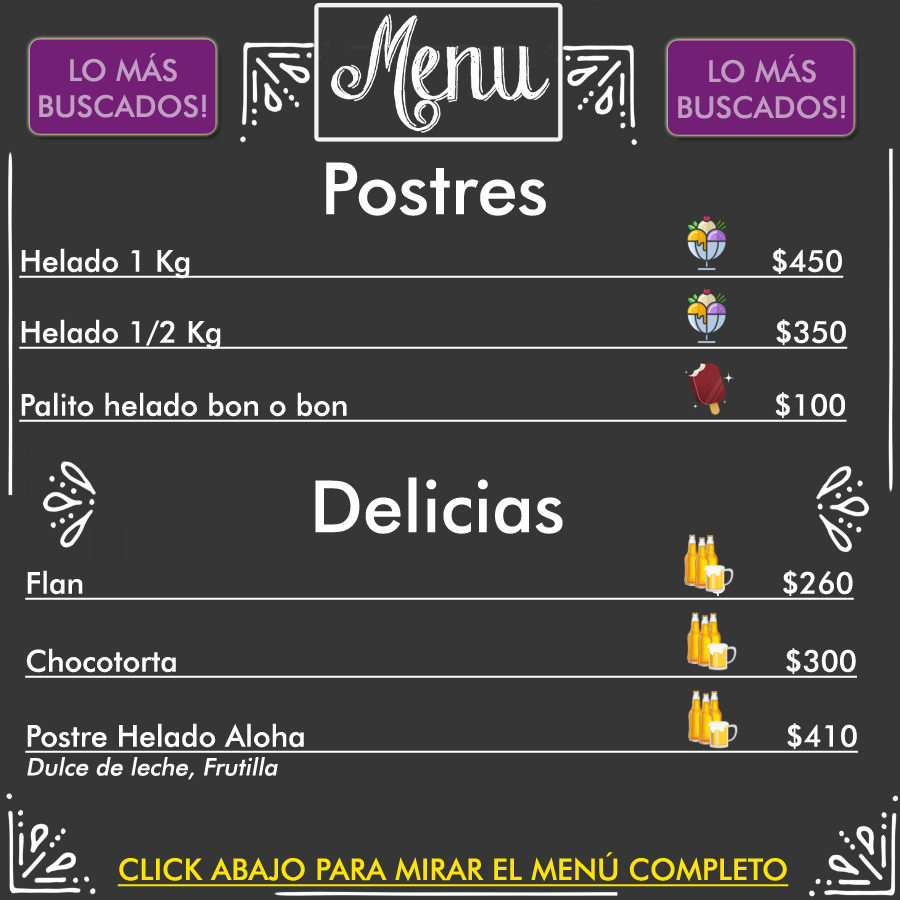
<style>
.page{position:relative;width:900px;height:900px;background:#363636}
.page>*{position:absolute;margin:0}
.t1{font:30px "FuturaBT-Medium";color:#c29dc3;text-transform:uppercase}
.t2{font:30px "FuturaBT-Medium";color:#c09ac1;text-transform:uppercase}
.t3{font:72px "FuturaBT-Medium";color:#ffffff}
.t4{font:30px "FuturaBT-Medium";color:#ffffff;text-decoration:underline}
.t5{font:24px "FuturaBT-Medium";color:#ffffff;font-style:italic}
.t6{font:30px "FuturaBT-Medium";color:#ffe400;text-transform:uppercase;text-decoration:underline}
</style>
<div class="page">
<p class="t1" style="left:39px;top:53px;width:167px;height:65px;text-align:center">lo mÁs<br>buscados!</p>
<p class="t2" style="left:678px;top:54px;width:167px;height:65px;text-align:center">lo mÁs<br>buscados!</p>
<p class="t3" style="left:326px;top:162px;width:220px;height:54px">Postres</p>
<p class="t4" style="left:19px;top:248px;width:825px;height:31px">Helado 1 Kg                                                                $450</p>
<p class="t4" style="left:19px;top:319px;width:829px;height:31px">Helado 1/2 Kg                                                             $350</p>
<p class="t4" style="left:19px;top:392px;width:828px;height:30px">Palito helado bon o bon                                               $100</p>
<p class="t3" style="left:315px;top:477px;width:248px;height:57px">Delicias</p>
<p class="t4" style="left:25px;top:570px;width:829px;height:30px">Flan                                                                     $      $260</p>
<p class="t4" style="left:25px;top:648px;width:832px;height:30px">Chocotorta                                                                   $300</p>
<p class="t4" style="left:25px;top:723px;width:833px;height:57px">Postre Helado Aloha                                                     $410<br><span class="t5">Dulce de leche, Frutilla</span></p>
<p class="t6" style="left:117px;top:852px;width:672px;height:35px">click abajo para mirar el menú completo</p>
</div>
